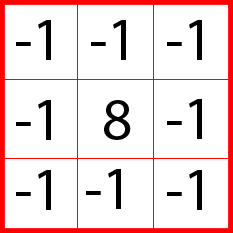
<style>
.page{position:relative;width:233px;height:233px;background:#ffffff}
.page>*{position:absolute;margin:0}
.t1{font:60px "MyriadPro-Regular";color:#000000}
</style>
<div class="page">
<p class="t1" style="left:16px;top:20px;width:35px;height:40px">-1e</p>
<p class="t1" style="left:91px;top:20px;width:35px;height:40px">-1e</p>
<p class="t1" style="left:167px;top:20px;width:35px;height:40px">-1e</p>
<p class="t1" style="left:16px;top:100px;width:35px;height:40px">-1e</p>
<p class="t1" style="left:104px;top:100px;width:27px;height:40px">8e</p>
<p class="t1" style="left:167px;top:99px;width:35px;height:40px">-1e</p>
<p class="t1" style="left:16px;top:170px;width:35px;height:40px">-1e</p>
<p class="t1" style="left:86px;top:169px;width:35px;height:40px">-1e</p>
<p class="t1" style="left:167px;top:170px;width:35px;height:40px">-1e</p>
</div>
